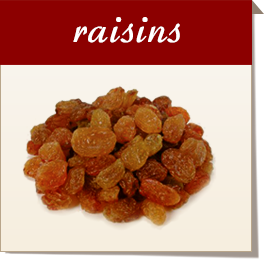
<style>
.page{position:relative;width:265px;height:259px;background:#8c0000}
.page>*{position:absolute;margin:0}
.t1{font:65px "Coronet";color:#ffffff}
</style>
<div class="page">
<p class="t1" style="left:73px;top:17px;width:107px;height:26px">raisins</p>
</div>
